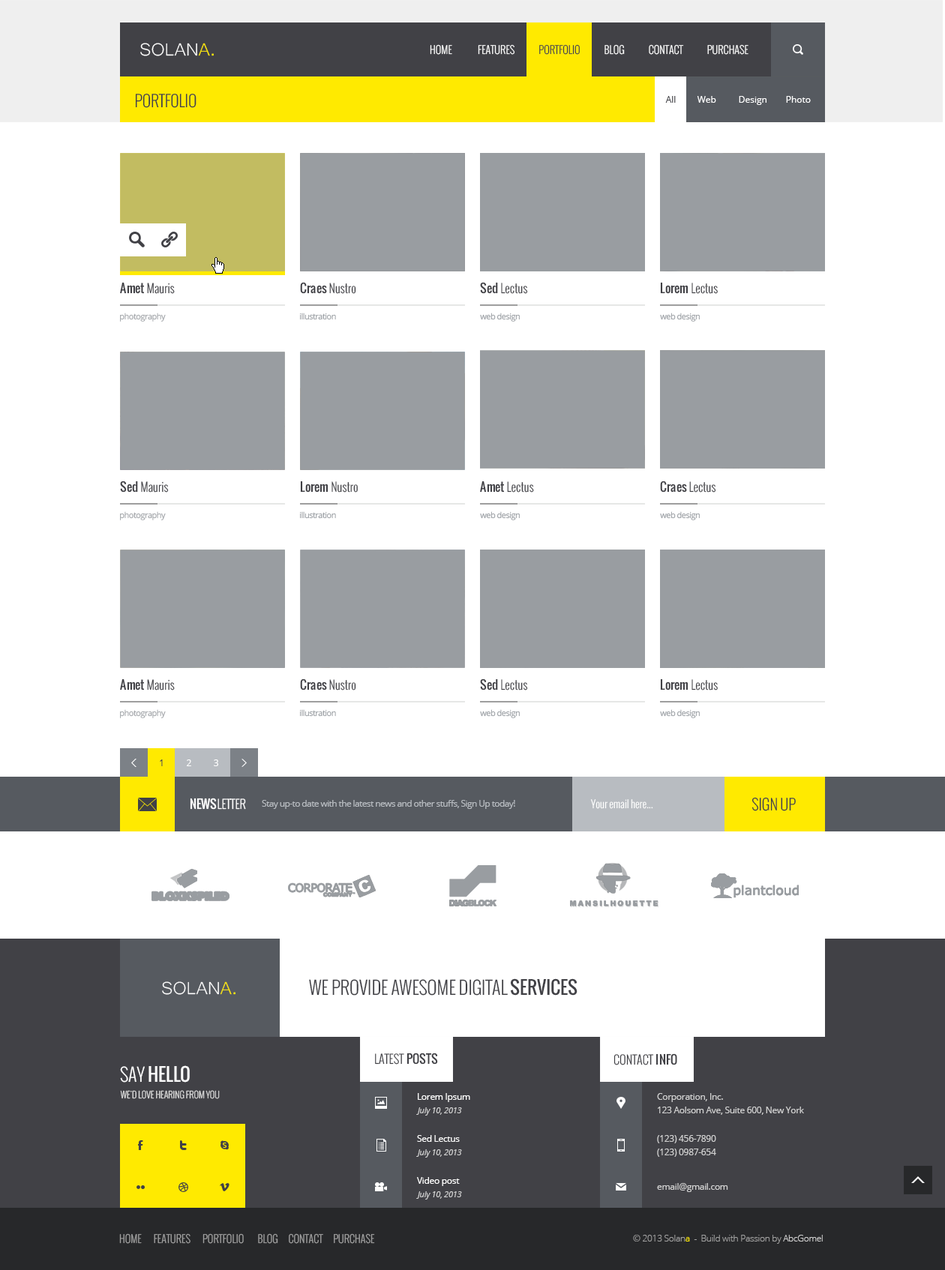
<style>
.page{position:relative;width:945px;height:1270px;background:#ffffff}
.page>*{position:absolute;margin:0}
.t1{font:22.5px "Microsoft-Yi-Baiti";color:#ffffff;text-transform:uppercase}
.t2{font:22.5px "Microsoft-Yi-Baiti";color:#ffea00;text-transform:uppercase}
.t3{font:10.5px "Oswald-Light";color:#fefefe;text-transform:uppercase}
.t4{font:10.5px "Oswald-Light";color:#414146;text-transform:uppercase}
.t5{font:15.8px "Oswald-Light";color:#414146;text-transform:uppercase}
.t6{font:9px "OpenSans";color:#414146}
.t7{font:9px "OpenSans";color:#ffffff}
.t8{font:12px "Oswald-Light";color:#414146}
.t9{font:12px "Oswald";color:#414146}
.t10{font:8.2px "OpenSans";letter-spacing:-0.05em;color:#9fa2a6}
.t11{font:8.2px "OpenSans";letter-spacing:-0.05em;color:#979ca1}
.t12{font:12px "Oswald-Light";color:#ffffff}
.t13{font:12px "Oswald";color:#ffffff}
.t14{font:15px "Oswald-Light";color:#414146}
.t15{font:9px "OpenSans";letter-spacing:-0.05em;color:#b8bcc1}
.t16{font:10.5px "Oswald-Light";letter-spacing:0.005em;color:#ffffff}
.t17{font:18px "Oswald-Light";color:#414146;text-transform:uppercase}
.t18{font:18px "Oswald";color:#414146;text-transform:uppercase}
.t19{font:18px "Oswald";color:#fdfdfd;text-transform:uppercase}
.t20{font:18px "Oswald-Light";color:#fdfdfd;text-transform:uppercase}
.t21{font:9px "Oswald-Light";color:#d7d7d7;text-transform:uppercase}
.t22{font:9px/13.5px "OpenSans";letter-spacing:-0.025em;color:#ffffff}
.t23{font:9px/13.5px "OpenSans";letter-spacing:-0.025em;color:#d1d1d1}
.t24{font:8.2px "OpenSans-Italic";letter-spacing:-0.025em;color:#d1d1d1}
.t25{font:9px "OpenSans";letter-spacing:-0.025em;color:#ffffff}
.t26{font:9px "OpenSans";letter-spacing:-0.025em;color:#d1d1d1}
.t27{font:10.5px "Oswald-Light";color:#a1a1a1}
.t28{font:9px "OpenSans-Light";letter-spacing:-0.025em;color:#a1a1a1}
.t29{font:9px "OpenSans-Light";letter-spacing:-0.025em;color:#ffea00}
.t30{font:9px "OpenSans-Light";letter-spacing:-0.025em;color:#d1d1d1}
</style>
<div class="page">
<p class="t1" style="left:140px;top:43px;width:74px;height:13px">solan<span class="t2">a.</span></p>
<p class="t3" style="left:430px;top:44px;width:318px;height:11px">Home               Features              <span class="t4">Portfolio</span>              Blog              Contact              Purchase</p>
<p class="t5" style="left:135px;top:93px;width:61px;height:15px">Portfolio</p>
<p class="t6" style="left:665px;top:96px;width:11px;height:7px">All</p>
<p class="t7" style="left:697px;top:96px;width:19px;height:7px">Web</p>
<p class="t7" style="left:739px;top:96px;width:27px;height:9px">Design</p>
<p class="t7" style="left:786px;top:96px;width:25px;height:7px">Photo</p>
<p class="t8" style="left:120px;top:282px;width:55px;height:12px"><span class="t9">Amet</span> Mauris</p>
<p class="t8" style="left:300px;top:282px;width:56px;height:12px"><span class="t9">Craes</span> Nustro</p>
<p class="t8" style="left:480px;top:282px;width:48px;height:12px"><span class="t9">Sed</span> Lectus</p>
<p class="t8" style="left:660px;top:282px;width:58px;height:12px"><span class="t9">Lorem</span> Lectus</p>
<p class="t10" style="left:120px;top:313px;width:46px;height:9px">photography</p>
<p class="t11" style="left:300px;top:313px;width:36px;height:7px"><span class="t10"><br></span>illustration</p>
<p class="t11" style="left:480px;top:313px;width:40px;height:9px"><span class="t10"><br></span>web design</p>
<p class="t11" style="left:660px;top:313px;width:40px;height:9px"><span class="t10"><br></span>web design</p>
<p class="t8" style="left:120px;top:481px;width:49px;height:12px"><span class="t9">Sed</span> Mauris</p>
<p class="t8" style="left:300px;top:481px;width:58px;height:12px"><span class="t9">Lorem</span> Nustro</p>
<p class="t8" style="left:480px;top:481px;width:54px;height:12px"><span class="t9">Amet</span> Lectus</p>
<p class="t8" style="left:660px;top:481px;width:56px;height:12px"><span class="t9">Craes</span> Lectus</p>
<p class="t10" style="left:120px;top:512px;width:46px;height:8px">photography</p>
<p class="t11" style="left:300px;top:512px;width:36px;height:7px"><span class="t10"><br></span>illustration</p>
<p class="t11" style="left:480px;top:512px;width:40px;height:8px"><span class="t10"><br></span>web design</p>
<p class="t11" style="left:660px;top:512px;width:40px;height:8px"><span class="t10"><br></span>web design</p>
<p class="t8" style="left:120px;top:679px;width:55px;height:12px"><span class="t9">Amet</span> Mauris</p>
<p class="t8" style="left:300px;top:679px;width:56px;height:12px"><span class="t9">Craes</span> Nustro</p>
<p class="t8" style="left:480px;top:679px;width:48px;height:12px"><span class="t9">Sed</span> Lectus</p>
<p class="t8" style="left:660px;top:679px;width:58px;height:12px"><span class="t9">Lorem</span> Lectus</p>
<p class="t10" style="left:120px;top:710px;width:46px;height:8px">photography</p>
<p class="t11" style="left:300px;top:710px;width:36px;height:7px"><span class="t10"><br></span>illustration</p>
<p class="t11" style="left:480px;top:710px;width:40px;height:8px"><span class="t10"><br></span>web design</p>
<p class="t11" style="left:660px;top:710px;width:40px;height:8px"><span class="t10"><br></span>web design</p>
<p class="t6" style="left:160px;top:760px;width:3px;height:6px">1</p>
<p class="t7" style="left:187px;top:760px;width:4px;height:6px">2</p>
<p class="t7" style="left:214px;top:760px;width:4px;height:6px">3</p>
<p class="t12" style="left:190px;top:798px;width:56px;height:12px"><span class="t13">NEWS</span>LETTER</p>
<p class="t14" style="left:752px;top:797px;width:44px;height:15px">SIGN UP</p>
<p class="t15" style="left:262px;top:800px;width:253px;height:9px">Stay up-to date with the latest news and other stuffs, Sign Up today!</p>
<p class="t16" style="left:590px;top:800px;width:63px;height:9px">Your email here...</p>
<p class="t1" style="left:162px;top:982px;width:74px;height:13px">solan<span class="t2">a.</span></p>
<p class="t17" style="left:309px;top:979px;width:269px;height:17px">we provide awesome digital <span class="t18">services</span></p>
<p class="t8" style="left:375px;top:1053px;width:63px;height:12px">LATEST <span class="t9">POSTS</span></p>
<p class="t8" style="left:614px;top:1054px;width:63px;height:12px">CONTACT <span class="t9">INFO</span></p>
<p class="t19" style="left:120px;top:1066px;width:70px;height:17px"><span class="t20">Say </span>hello</p>
<p class="t21" style="left:120px;top:1090px;width:100px;height:10px">we'd love hearing from you</p>
<p class="t22" style="left:418px;top:1094px;width:52px;height:8px">Lorem Ipsum<br>ipsumage post</p>
<p class="t23" style="left:657px;top:1094px;width:147px;height:21px">Corporation, Inc.<br>123 Aolsom Ave, Suite 600, New York</p>
<p class="t24" style="left:416px;top:1108px;width:46px;height:8px">July 10, 2013</p>
<p class="t25" style="left:417px;top:1136px;width:43px;height:6px">Sed Lectus</p>
<p class="t23" style="left:657px;top:1136px;width:59px;height:21px">(123) 456-7890<br>(123) 0987-654</p>
<p class="t24" style="left:416px;top:1150px;width:46px;height:8px">July 10, 2013</p>
<p class="t25" style="left:417px;top:1178px;width:43px;height:8px">Video post</p>
<p class="t24" style="left:416px;top:1192px;width:46px;height:8px">July 10, 2013</p>
<p class="t26" style="left:657px;top:1184px;width:71px;height:8px">email@gmail.com</p>
<p class="t27" style="left:119px;top:1234px;width:256px;height:10px">HOME       FEATURES       PORTFOLIO        BLOG      CONTACT      PURCHASE</p>
<p class="t28" style="left:633px;top:1235px;width:190px;height:9px">© 2013 Solan<span class="t29">a </span> -  Build with Passion by <span class="t30">AbcGomel</span></p>
</div>
